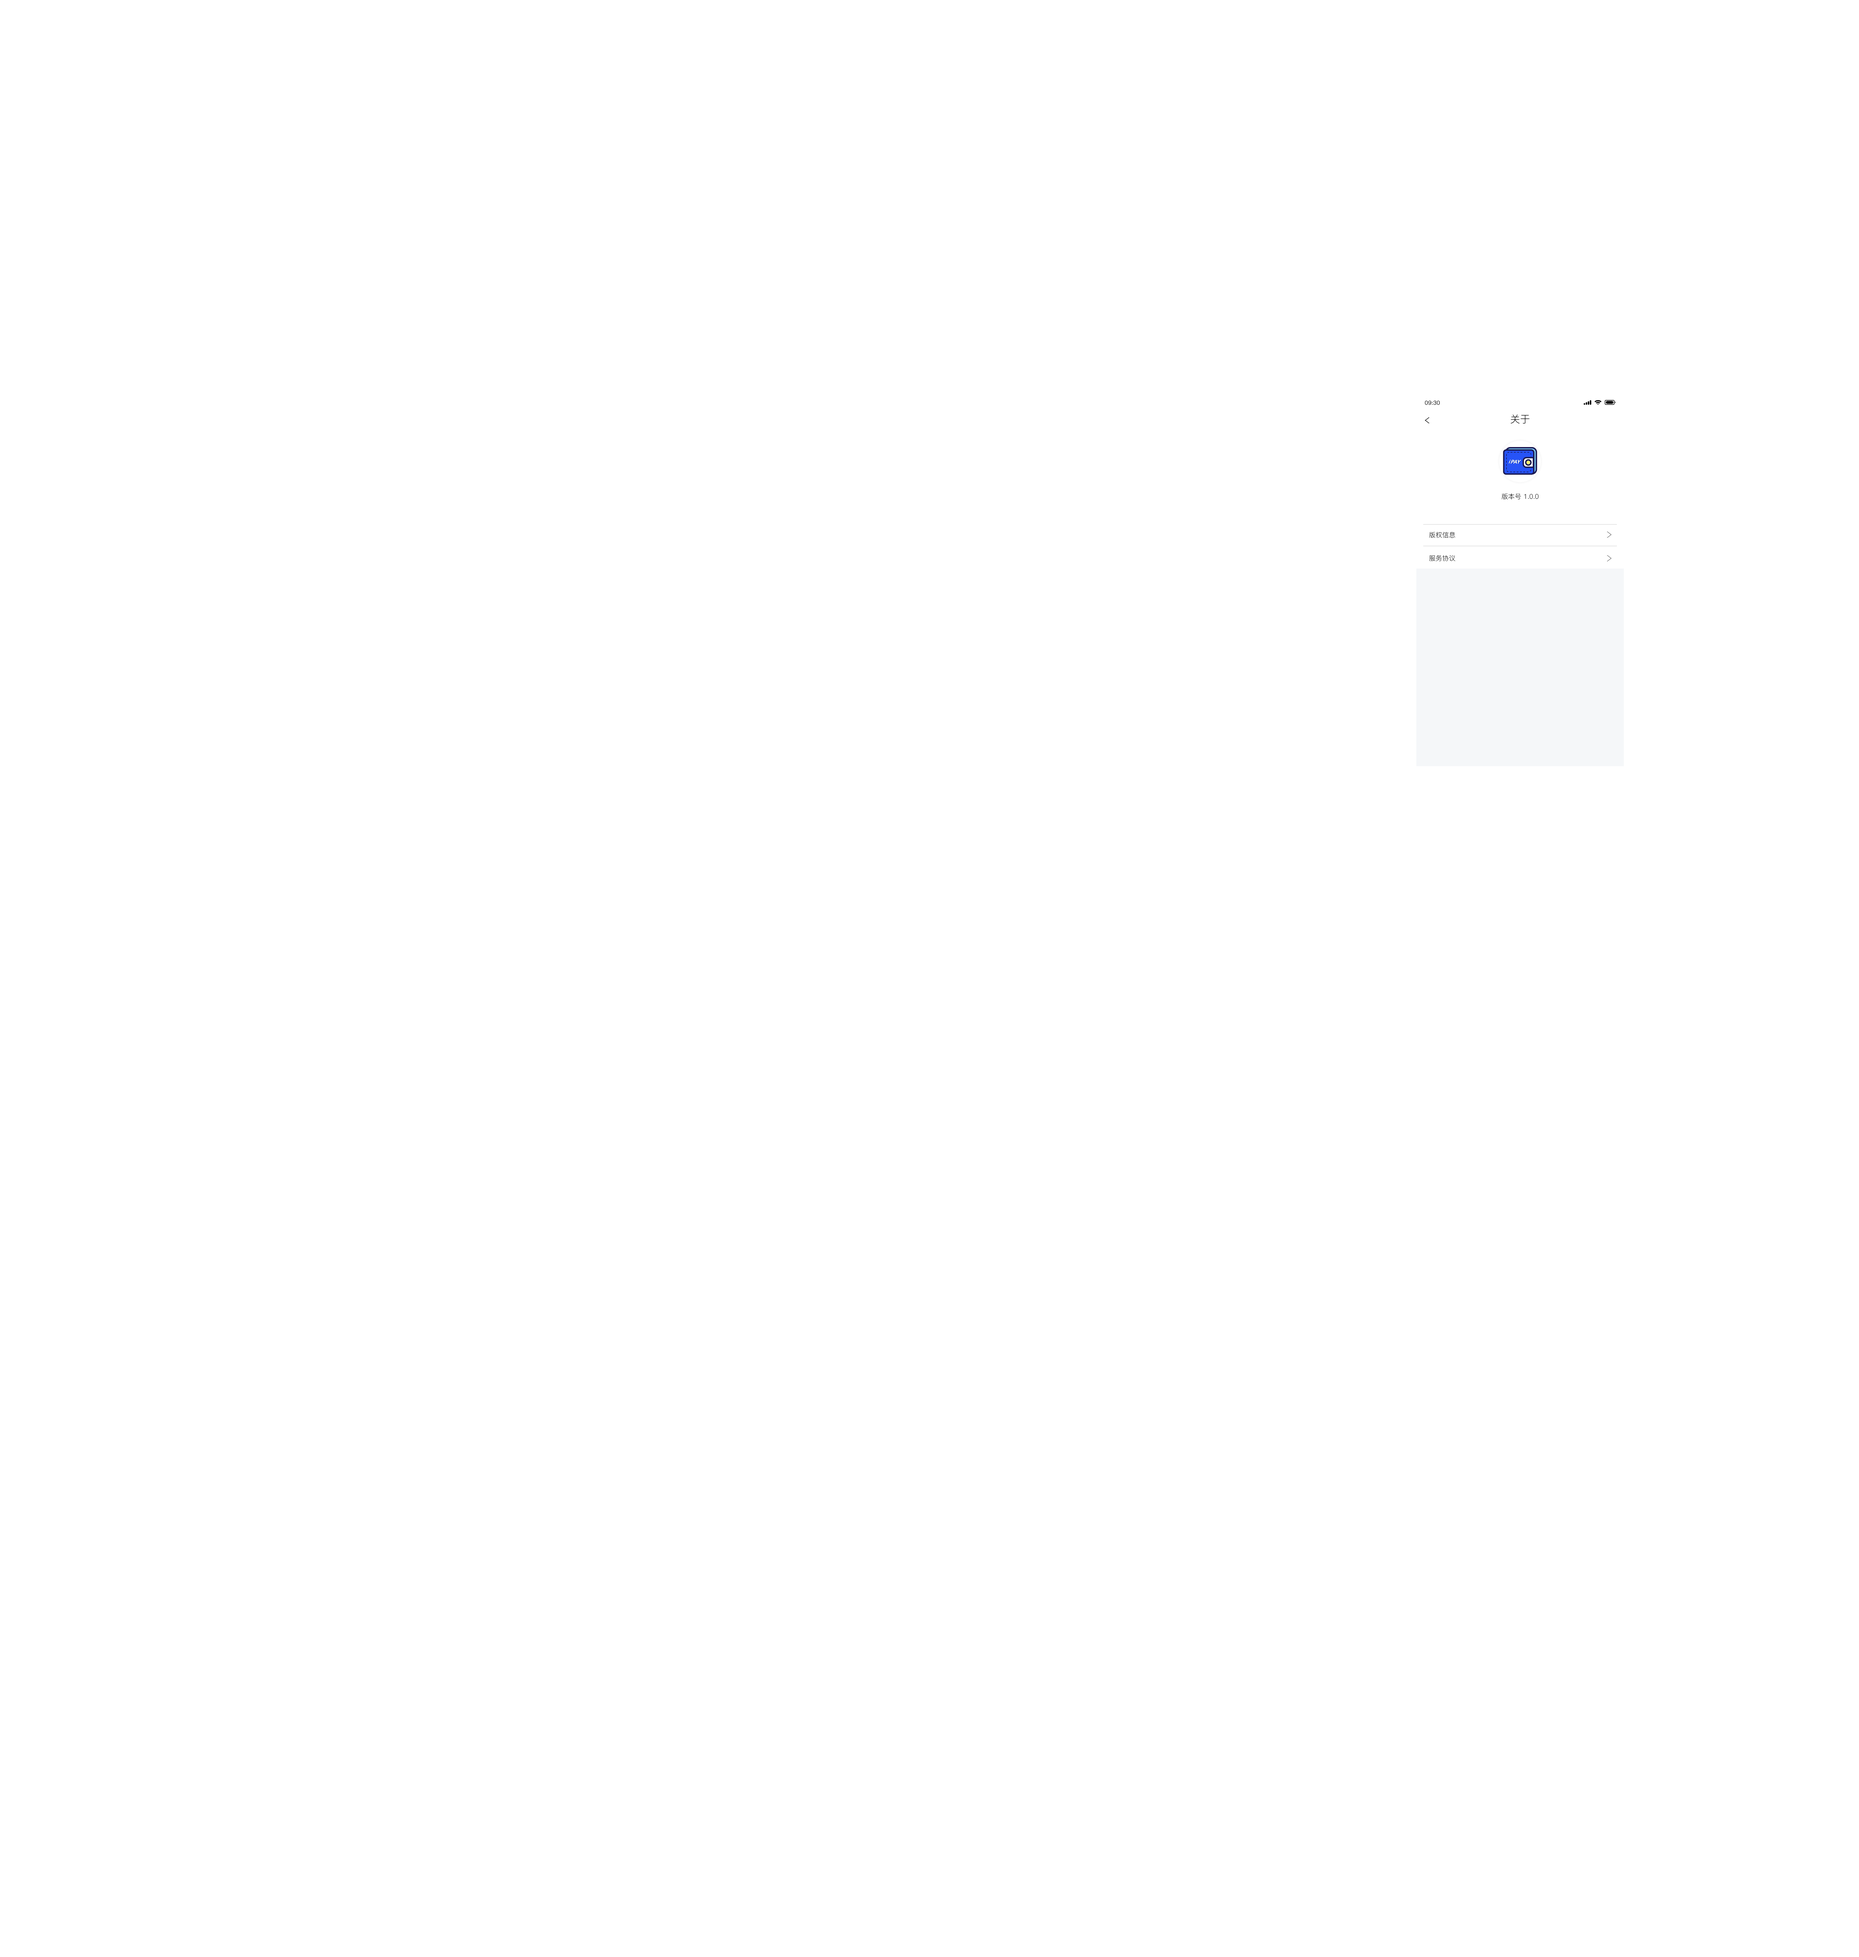
<style>
.page{position:relative;width:1859px;height:1957px;background:#ffffff}
.page>*{position:absolute;margin:0}
.t1{font:5.5px "PingFang-SC-Regular";color:#000000;font-weight:bold}
.t2{font:10px "PingFang-SC-Regular";color:#000000}
.t3{font:6.6px "PingFang-SC-Regular";color:#000000}
</style>
<div class="page">
<p class="t1" style="left:1425px;top:400px;width:15px;height:5px">09:30</p>
<p class="t2" style="left:1511px;top:414px;width:19px;height:10px">关于</p>
<p class="t3" style="left:1502px;top:493px;width:37px;height:7px">版本号 1.0.0</p>
<p class="t3" style="left:1429px;top:532px;width:27px;height:6px">版权信息</p>
<p class="t3" style="left:1430px;top:555px;width:26px;height:6px">服务协议</p>
</div>
